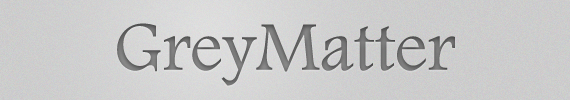
<style>
.page{position:relative;width:570px;height:100px}
.page>*{position:absolute;margin:0}
.t1{font:72px "FootlightMTLight";color:#727272}
</style>
<div class="page">
<p class="t1" style="left:117px;top:23px;width:338px;height:63px">GreyMatter</p>
</div>
